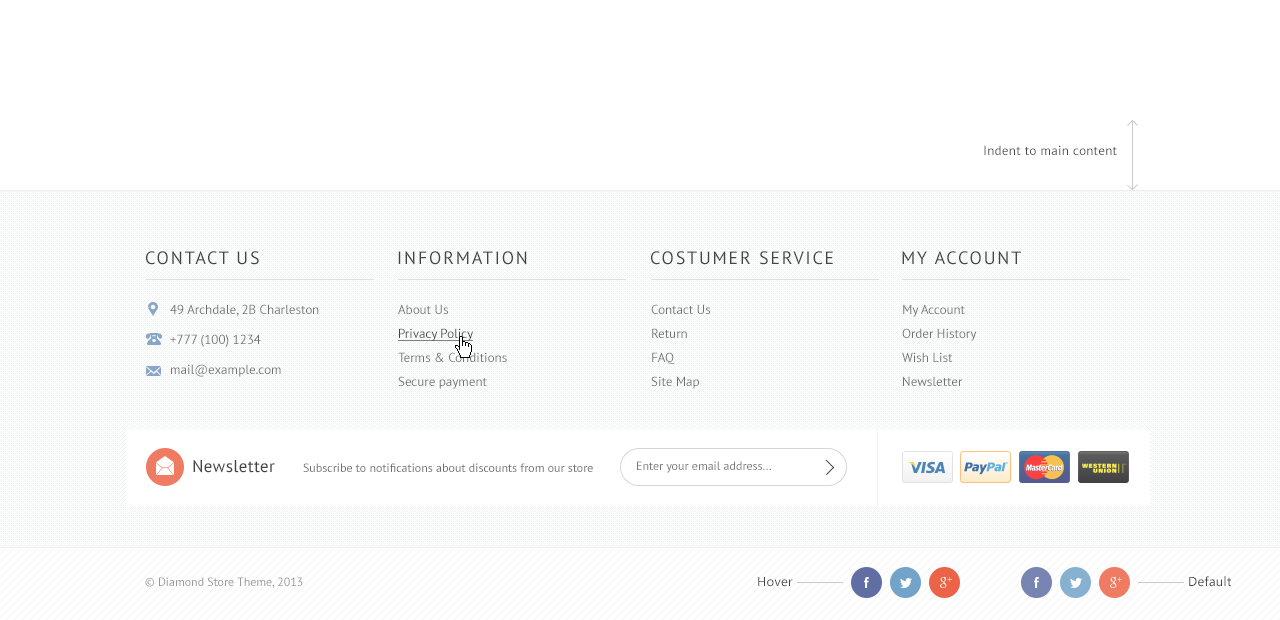
<style>
.page{position:relative;width:1280px;height:620px;background:#ffffff}
.page>*{position:absolute;margin:0}
.t1{font:13px "PTSans-Regular";letter-spacing:0.025em;color:#444444}
.t2{font:18px "PTSans-Regular";letter-spacing:0.1em;color:#444444;text-transform:uppercase}
.t3{font:13px/30px "PTSans-Regular";color:#707070}
.t4{font:13px/24px "PTSans-Regular";color:#707070}
.t5{font:13px/24px "PTSans-Regular";color:#444444;text-decoration:underline}
.t6{font:17px "PTSans-Regular";letter-spacing:0.025em;color:#444444}
.t7{font:12px "PTSans-Regular";color:#777777}
.t8{font:12px "PTSans-Regular";color:#707070}
.t9{font:12px "PTSans-Regular";color:#999999}
.t10{font:13px "SegoeUI";letter-spacing:0.025em;color:#444444}
</style>
<div class="page">
<p class="t1" style="left:984px;top:145px;width:133px;height:10px">Indent to main content</p>
<p class="t2" style="left:146px;top:251px;width:113px;height:14px">Contact Us</p>
<p class="t2" style="left:398px;top:251px;width:129px;height:14px">Information</p>
<p class="t2" style="left:651px;top:251px;width:182px;height:14px">Costumer Service</p>
<p class="t2" style="left:902px;top:251px;width:119px;height:14px">My Account</p>
<p class="t3" style="left:170px;top:304px;width:149px;height:73px"><span class="t4">49 Archdale, 2B Charleston<br></span>+777 (100) 1234<br>mail@example.com</p>
<p class="t4" style="left:398px;top:304px;width:109px;height:85px">About Us<br><span class="t5">Privacy Policy<br></span>Terms &amp; Conditions<br>Secure payment</p>
<p class="t4" style="left:651px;top:304px;width:60px;height:85px">Contact Us<br>Return<br>FAQ<br>Site Map</p>
<p class="t4" style="left:902px;top:304px;width:75px;height:82px">My Account<br>Order History<br>Wish List<br>Newsletter</p>
<p class="t6" style="left:193px;top:460px;width:82px;height:13px">Newsletter</p>
<p class="t7" style="left:637px;top:461px;width:134px;height:12px">Enter your email address...</p>
<p class="t8" style="left:303px;top:463px;width:290px;height:9px">Subscribe to notifications about discounts from our store</p>
<p class="t9" style="left:145px;top:577px;width:158px;height:11px">© Diamond Store Theme, 2013</p>
<p class="t10" style="left:758px;top:577px;width:35px;height:10px">Hover</p>
<p class="t10" style="left:1189px;top:576px;width:42px;height:11px">Default</p>
</div>
